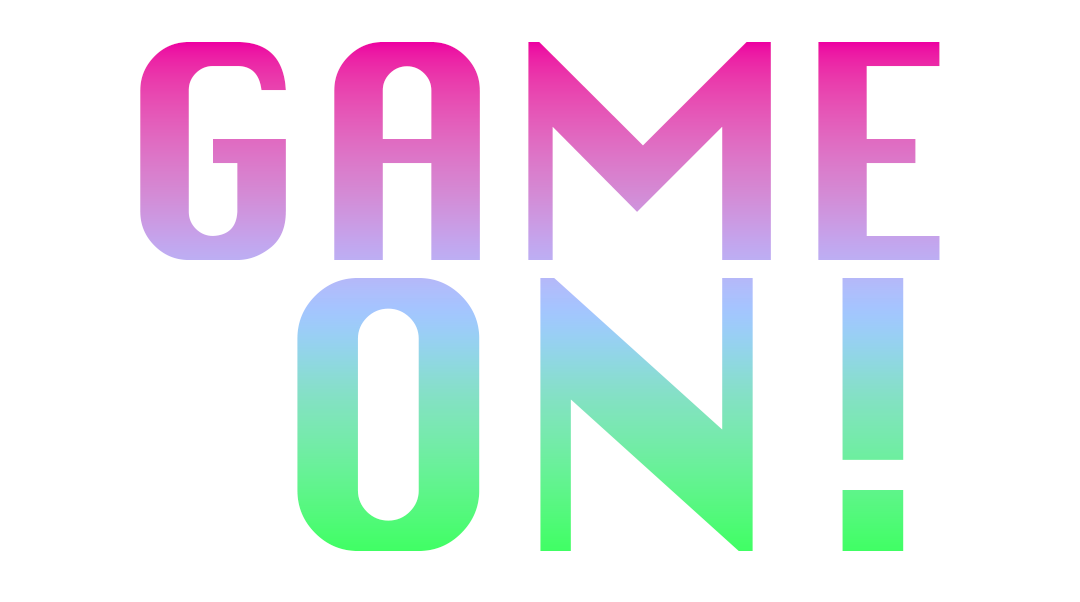
<style>
.page{position:relative;width:1080px;height:602px;background:#ffffff}
.page>*{position:absolute;margin:0}
.t1{font:291px/291px "Krungthep"}
.t2{font:363.7px/291px "Krungthep"}
</style>
<div class="page">
<p class="t1" style="left:140px;top:42px;width:800px;height:509px;text-align:right">GAME<br><span class="t2">ON!</span></p>
</div>
